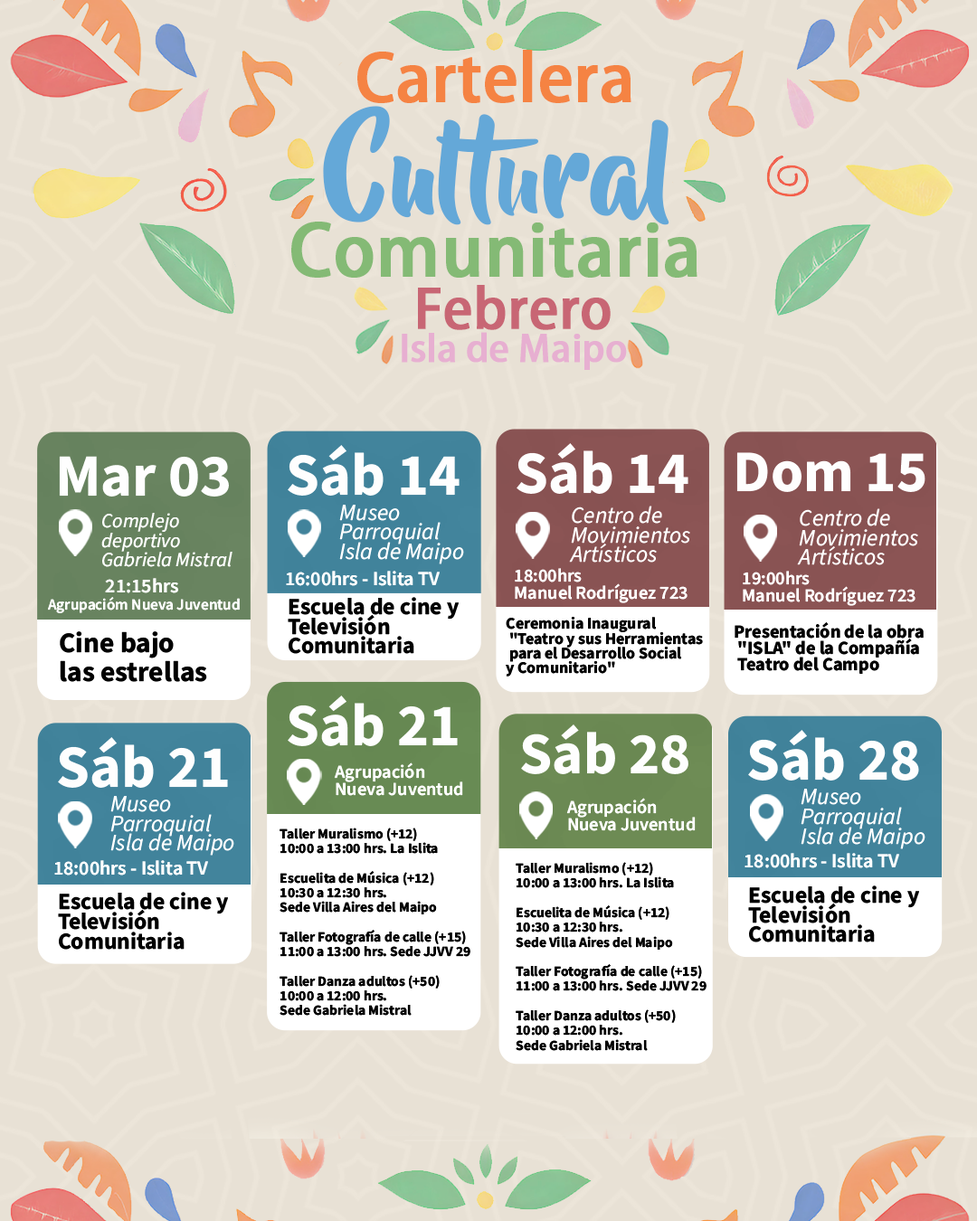
<style>
.page{position:relative;width:977px;height:1221px;background:#e8e1d5}
.page>*{position:absolute;margin:0}
.t1{font:64.2px "AdobeHeitiStd-Regular";color:#f58343;font-weight:bold}
.t2{font:105.8px "BeyondTheMountains";color:#64a8d8;font-weight:bold}
.t3{font:69.6px "AdobeHeitiStd-Regular";color:#84ba75;font-weight:bold}
.t4{font:36.2px/33.5px "AdobeHeitiStd-Regular";color:#e7afd1;font-weight:bold}
.t5{font:53.4px/28px "AdobeHeitiStd-Regular";color:#c86674;font-weight:bold}
.t6{font:59.9px "SourceSansRoman-Bold";color:#fefefe;font-weight:bold}
.t7{font:58.9px "SourceSansRoman-Bold";color:#fefefe;font-weight:bold}
.t8{font:23.1px/19.7px "SourceSansItalic-Italic";color:#ffffff;font-weight:bold}
.t9{font:20.1px/19.7px "SourceSansItalic-Italic";color:#ffffff;font-weight:bold}
.t10{font:18.4px/16.9px "SourceSansRoman-Semibold";color:#ffffff;font-weight:bold}
.t11{font:15.6px/16.9px "SourceSansRoman-Semibold";color:#ffffff;font-weight:bold}
.t12{font:19.9px/16.9px "SourceSansRoman-Semibold";color:#ffffff;font-weight:bold}
.t13{font:19.9px "SourceSansRoman-Semibold";color:#ffffff;font-weight:bold}
.t14{font:23.1px/19.7px "SourceSansRoman-Bold";color:#000000;font-weight:bold}
.t15{font:16.2px/14.7px "SourceSansRoman-Bold";color:#000000;font-weight:bold}
.t16{font:18.4px/16.2px "SourceSansRoman-Bold";color:#000000;font-weight:bold}
.t17{font:28.4px/29.3px "SourceSansRoman-Bold";color:#000000;font-weight:bold}
.t18{font:14px/14.7px "SourceSansRoman-Bold";color:#000000;font-weight:bold}
</style>
<div class="page">
<p class="t1" style="left:357px;top:50px;width:274px;height:53px">Cartelera</p>
<p class="t2" style="left:323px;top:106px;width:346px;height:119px">Cultural</p>
<p class="t3" style="left:291px;top:222px;width:406px;height:56px">Comunitaria</p>
<p class="t4" style="left:402px;top:285px;width:225px;height:85px;text-align:center"><span class="t5">Febrero<br></span>Isla de Maipo</p>
<p class="t6" style="left:288px;top:445px;width:171px;height:51px">Sáb 14</p>
<p class="t6" style="left:516px;top:443px;width:172px;height:51px">Sáb 14</p>
<p class="t6" style="left:59px;top:456px;width:170px;height:40px">Mar 03</p>
<p class="t7" style="left:736px;top:452px;width:189px;height:40px">Dom 15</p>
<p class="t8" style="left:339px;top:505px;width:125px;height:59px">Museo <br>Parroquial<br>Isla de Maipo</p>
<p class="t8" style="left:569px;top:506px;width:121px;height:57px">Centro de<br>Movimientos<br>Artísticos</p>
<p class="t8" style="left:797px;top:508px;width:121px;height:57px">Centro de<br>Movimientos<br>Artísticos</p>
<p class="t9" style="left:101px;top:513px;width:131px;height:54px">Complejo <br>deportivo<br>Gabriela Mistral</p>
<p class="t10" style="left:515px;top:568px;width:172px;height:35px">18:00hrs<br>Manuel Rodríguez 723</p>
<p class="t11" style="left:48px;top:578px;width:192px;height:35px;text-align:center"><span class="t12">21:15hrs <br></span>Agrupacióm Nueva Juventud</p>
<p class="t13" style="left:286px;top:571px;width:154px;height:15px">16:00hrs - Islita TV</p>
<p class="t10" style="left:742px;top:571px;width:173px;height:35px">19:00hrs<br>Manuel Rodríguez 723</p>
<p class="t14" style="left:288px;top:597px;width:171px;height:57px">Escuela de cine y<br>Televisión<br>Comunitaria</p>
<p class="t15" style="left:506px;top:617px;width:197px;height:59px">Ceremonia Inaugural<br> "Teatro y sus Herramientas<br> para el Desarrollo Social <br>y Comunitario"</p>
<p class="t16" style="left:734px;top:622px;width:189px;height:52px">Presentación de la obra<br> "ISLA" de la Compañía<br> Teatro del Campo</p>
<p class="t17" style="left:60px;top:631px;width:147px;height:51px">Cine bajo <br>las estrellas</p>
<p class="t6" style="left:288px;top:695px;width:170px;height:51px">Sáb 21</p>
<p class="t7" style="left:521px;top:724px;width:167px;height:50px">Sáb 28</p>
<p class="t6" style="left:58px;top:737px;width:170px;height:51px">Sáb 21</p>
<p class="t6" style="left:748px;top:730px;width:171px;height:50px">Sáb 28</p>
<p class="t10" style="left:334px;top:762px;width:129px;height:34px">Agrupación<br>Nueva Juventud</p>
<p class="t8" style="left:110px;top:796px;width:124px;height:60px">Museo <br>Parroquial<br>Isla de Maipo</p>
<p class="t10" style="left:566px;top:798px;width:129px;height:33px">Agrupación<br>Nueva Juventud</p>
<p class="t8" style="left:800px;top:789px;width:125px;height:60px">Museo <br>Parroquial<br>Isla de Maipo</p>
<p class="t18" style="left:279px;top:827px;width:191px;height:189px">Taller Muralismo (+12) <br>10:00 a 13:00 hrs. La Islita <br><br>Escuelita de Música (+12) <br>10:30 a 12:30 hrs.<br>Sede Villa Aires del Maipo<br><br>Taller Fotografía de calle (+15)<br>11:00 a 13:00 hrs. Sede JJVV 29<br><br>Taller Danza adultos (+50)<br>10:00 a 12:00 hrs.<br>Sede Gabriela Mistral</p>
<p class="t13" style="left:744px;top:853px;width:155px;height:15px">18:00hrs - Islita TV</p>
<p class="t13" style="left:54px;top:860px;width:154px;height:15px">18:00hrs - Islita TV</p>
<p class="t18" style="left:515px;top:862px;width:191px;height:189px">Taller Muralismo (+12) <br>10:00 a 13:00 hrs. La Islita <br><br>Escuelita de Música (+12) <br>10:30 a 12:30 hrs.<br>Sede Villa Aires del Maipo<br><br>Taller Fotografía de calle (+15)<br>11:00 a 13:00 hrs. Sede JJVV 29<br><br>Taller Danza adultos (+50)<br>10:00 a 12:00 hrs.<br>Sede Gabriela Mistral</p>
<p class="t14" style="left:58px;top:892px;width:170px;height:58px">Escuela de cine y<br>Televisión<br>Comunitaria</p>
<p class="t14" style="left:748px;top:885px;width:171px;height:57px">Escuela de cine y<br>Televisión<br>Comunitaria</p>
</div>
